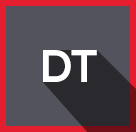
<style>
.page{position:relative;width:136px;height:132px;background:#53535d}
.page>*{position:absolute;margin:0}
.t1{font:44.4px "NexaBold";color:#ffffff}
</style>
<div class="page">
<p class="t1" style="left:43px;top:50px;width:54px;height:32px">DT</p>
</div>
